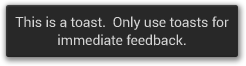
<style>
.page{position:relative;width:246px;height:66px;background:#282828}
.page>*{position:absolute;margin:0}
.t1{font:14px/18px "Roboto-Regular";letter-spacing:-0.005em;color:#d4d4d4}
</style>
<div class="page">
<p class="t1" style="left:15px;top:16px;width:214px;height:30px;text-align:center">This is a toast.  Only use toasts for<br>immediate feedback.</p>
</div>
